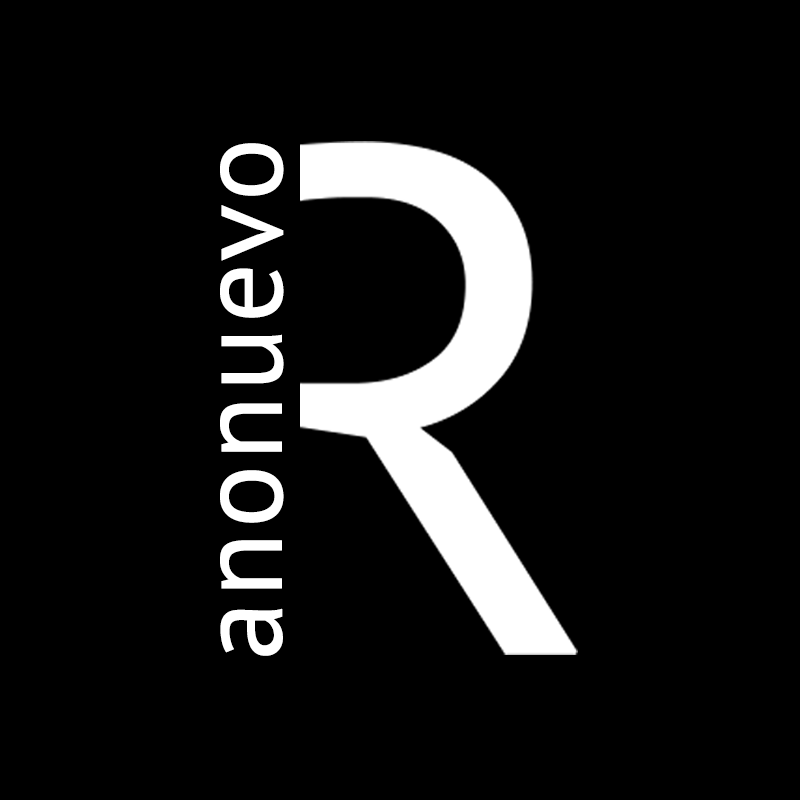
<style>
.page{position:relative;width:800px;height:800px;background:#000000}
.page>*{position:absolute;margin:0}
.t1{font:119.4px "PTSans-Regular";letter-spacing:0.01em;color:#ffffff;font-weight:bold}
</style>
<div class="page">
<p class="t1" style="left:220px;top:143px;width:64px;height:513px;rotate:-90deg">anonuevo</p>
</div>
